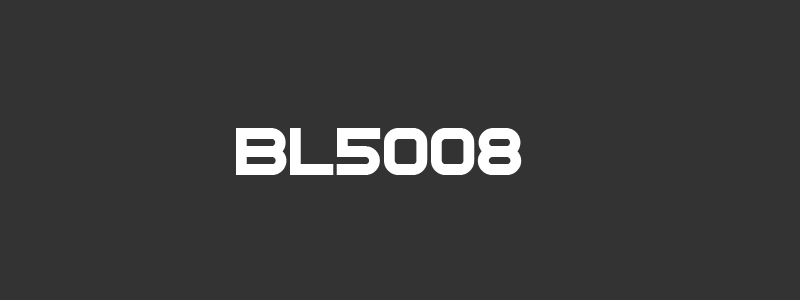
<style>
.page{position:relative;width:800px;height:300px;background:#333333}
.page>*{position:absolute;margin:0}
.t1{font:72px "TerminatorTwo";color:#ffffff}
</style>
<div class="page">
<p class="t1" style="left:236px;top:128px;width:286px;height:47px">BL5008</p>
</div>
